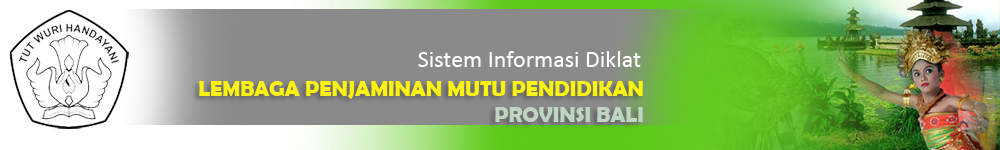
<style>
.page{position:relative;width:1000px;height:150px;background:#8a8a8a}
.page>*{position:absolute;margin:0}
.t1{font:24px "Calibri";color:#ffffff}
.t2{font:21.7px "BerlinSansFBDemi-Bold";color:#fbf30f}
.t3{font:21.7px "BerlinSansFBDemi-Bold";color:#bed5c2}
</style>
<div class="page">
<p class="t1" style="left:418px;top:51px;width:223px;height:16px">Sistem Informasi Diklat</p>
<p class="t2" style="left:199px;top:81px;width:444px;height:41px;text-align:right">LEMBAGA PENJAMINAN MUTU PENDIDIKAN<br><span class="t3">PROVINSI BALI</span></p>
</div>
